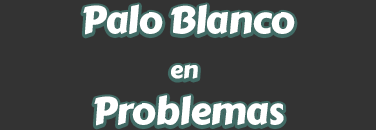
<style>
.page{position:relative;width:376px;height:130px;background:#333333}
.page>*{position:absolute;margin:0}
.t1{font:38px "CarterOne";letter-spacing:-0.02em;color:#ffffff}
.t2{font:24px "CarterOne";letter-spacing:-0.02em;color:#ffffff}
</style>
<div class="page">
<p class="t1" style="left:83px;top:4px;width:212px;height:122px;text-align:center">Palo Blanco<br><span class="t2">en</span> <br>Problemas</p>
</div>
